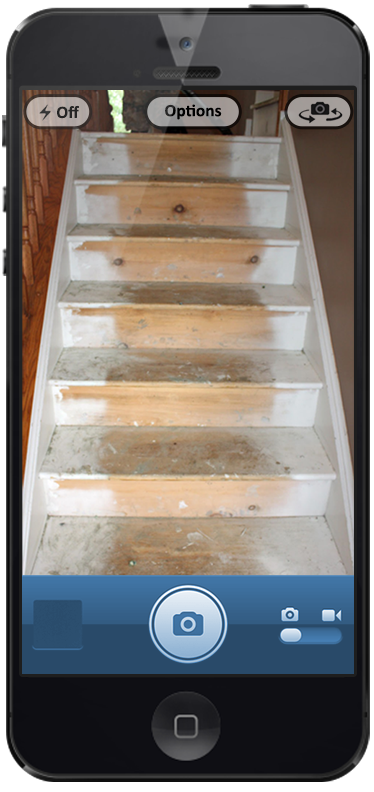
<style>
.page{position:relative;width:374px;height:792px}
.page>*{position:absolute;margin:0}
.t1{font:17.4px "Calibri-Bold";color:#252525}
.t2{font:17.4px "Calibri-Bold";color:#000000}
</style>
<div class="page">
<p class="t1" style="left:57px;top:105px;width:22px;height:14px">Off</p>
<p class="t2" style="left:165px;top:104px;width:57px;height:16px">Options</p>
</div>
